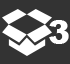
<style>
.page{position:relative;width:70px;height:64px;background:#333333}
.page>*{position:absolute;margin:0}
.t1{font:33.3px "Arial-Black";color:#ffffff}
</style>
<div class="page">
<p class="t1" style="left:49px;top:20px;width:20px;height:24px">3</p>
</div>
